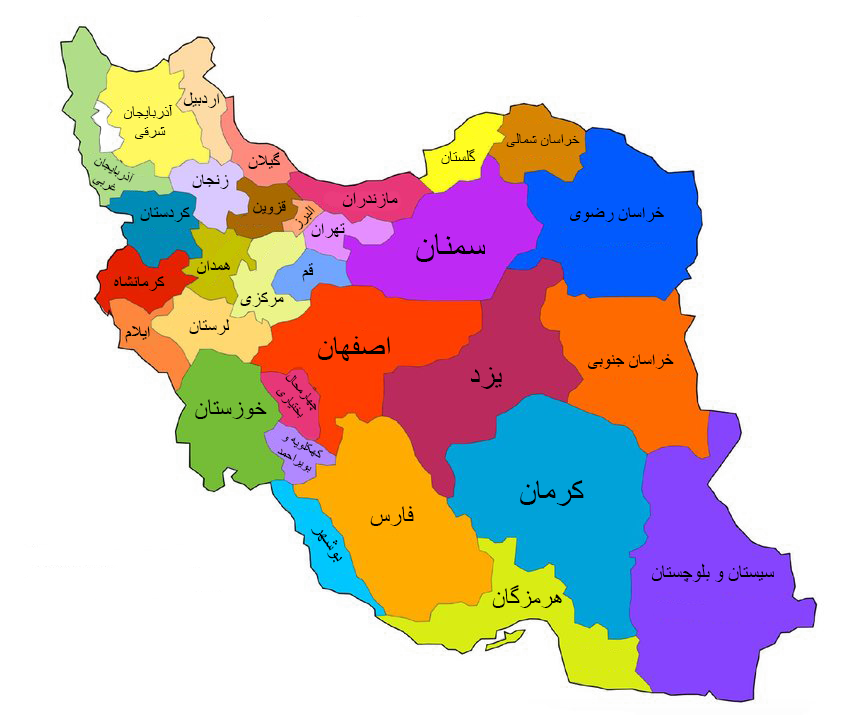
<style>
.page{position:relative;width:850px;height:715px;background:#ffffff}
.page>*{position:absolute;margin:0}
.t1{font:18px "TimesNewRomanPSMT";color:#000000}
.t2{font:16px "TimesNewRomanPSMT";color:#000000}
.t3{font:15.5px "TimesNewRomanPSMT";color:#000000}
.t4{font:13.4px "TimesNewRomanPSMT";color:#000000}
.t5{font:18.9px "TimesNewRomanPSMT";color:#000000}
.t6{font:16.7px "TimesNewRomanPSMT";color:#000000}
.t7{font:15.2px "TimesNewRomanPSMT";color:#000000}
.t8{font:18.2px "TimesNewRomanPSMT";color:#000000}
.t9{font:36px "TimesNewRomanPSMT";color:#000000}
.t10{font:30px "TimesNewRomanPSMT";color:#000000}
.t11{font:17.8px "TimesNewRomanPSMT";color:#000000}
.t12{font:13.3px "TimesNewRomanPSMT";color:#000000}
.t13{font:24px "TimesNewRomanPSMT";color:#000000}
.t14{font:13.1px "TimesNewRomanPSMT";color:#000000}
.t15{font:31.7px "TimesNewRomanPSMT";color:#000000}
.t16{font:20.5px "TimesNewRomanPSMT";color:#000000}
.t17{font:19.8px "TimesNewRomanPSMT";color:#000000}
</style>
<div class="page">
<p class="t1" style="left:183px;top:92px;width:37px;height:16px">اردبیل</p>
<p class="t2" style="left:124px;top:105px;width:49px;height:34px;text-align:center">آذربایجان<br> شرقی</p>
<p class="t3" style="left:506px;top:133px;width:74px;height:14px">خراسان شمالی</p>
<p class="t2" style="left:441px;top:149px;width:35px;height:15px">گلستان</p>
<p class="t4" style="left:92px;top:158px;width:43px;height:33px;rotate:30deg">آذربایجان غربی</p>
<p class="t1" style="left:248px;top:152px;width:32px;height:17px">گیلان</p>
<p class="t1" style="left:192px;top:174px;width:37px;height:15px">زنجان</p>
<p class="t5" style="left:342px;top:192px;width:56px;height:16px">مازندران</p>
<p class="t1" style="left:140px;top:207px;width:50px;height:15px">کردستان</p>
<p class="t6" style="left:253px;top:200px;width:33px;height:15px;rotate:1deg">قزوین</p>
<p class="t7" style="left:295px;top:205px;width:20px;height:25px;rotate:-42deg">البرز</p>
<p class="t8" style="left:570px;top:207px;width:94px;height:15px">خراسان رضوی</p>
<p class="t1" style="left:311px;top:223px;width:34px;height:15px">تهران</p>
<p class="t9" style="left:416px;top:233px;width:69px;height:29px">سمنان</p>
<p class="t1" style="left:197px;top:260px;width:33px;height:14px">همدان</p>
<p class="t1" style="left:302px;top:263px;width:12px;height:19px">قم</p>
<p class="t1" style="left:114px;top:276px;width:51px;height:15px">کرمانشاهف</p>
<p class="t1" style="left:240px;top:292px;width:44px;height:15px">مرکزی</p>
<p class="t1" style="left:125px;top:326px;width:25px;height:17px">ایلام</p>
<p class="t1" style="left:189px;top:319px;width:41px;height:16px">لرستان</p>
<p class="t10" style="left:318px;top:336px;width:72px;height:25px">اصفهان</p>
<p class="t11" style="left:588px;top:354px;width:86px;height:15px">خراسان جنوبی</p>
<p class="t12" style="left:275px;top:375px;width:42px;height:43px;rotate:48deg">چهارمحال بختیاری</p>
<p class="t10" style="left:470px;top:367px;width:32px;height:22px">یزد</p>
<p class="t13" style="left:195px;top:399px;width:72px;height:20px">خوزستان</p>
<p class="t14" style="left:277px;top:436px;width:46px;height:37px;rotate:29deg">کهکلویه و بویراحمد</p>
<p class="t15" style="left:520px;top:480px;width:64px;height:26px">کرمان</p>
<p class="t13" style="left:370px;top:506px;width:44px;height:20px">فارس</p>
<p class="t16" style="left:311px;top:529px;width:32px;height:34px;rotate:56deg">بوشهر</p>
<p class="t17" style="left:651px;top:563px;width:123px;height:19px">سیستان و بلوچستان</p>
<p class="t13" style="left:492px;top:585px;width:70px;height:23px">هرمزگان</p>
</div>
